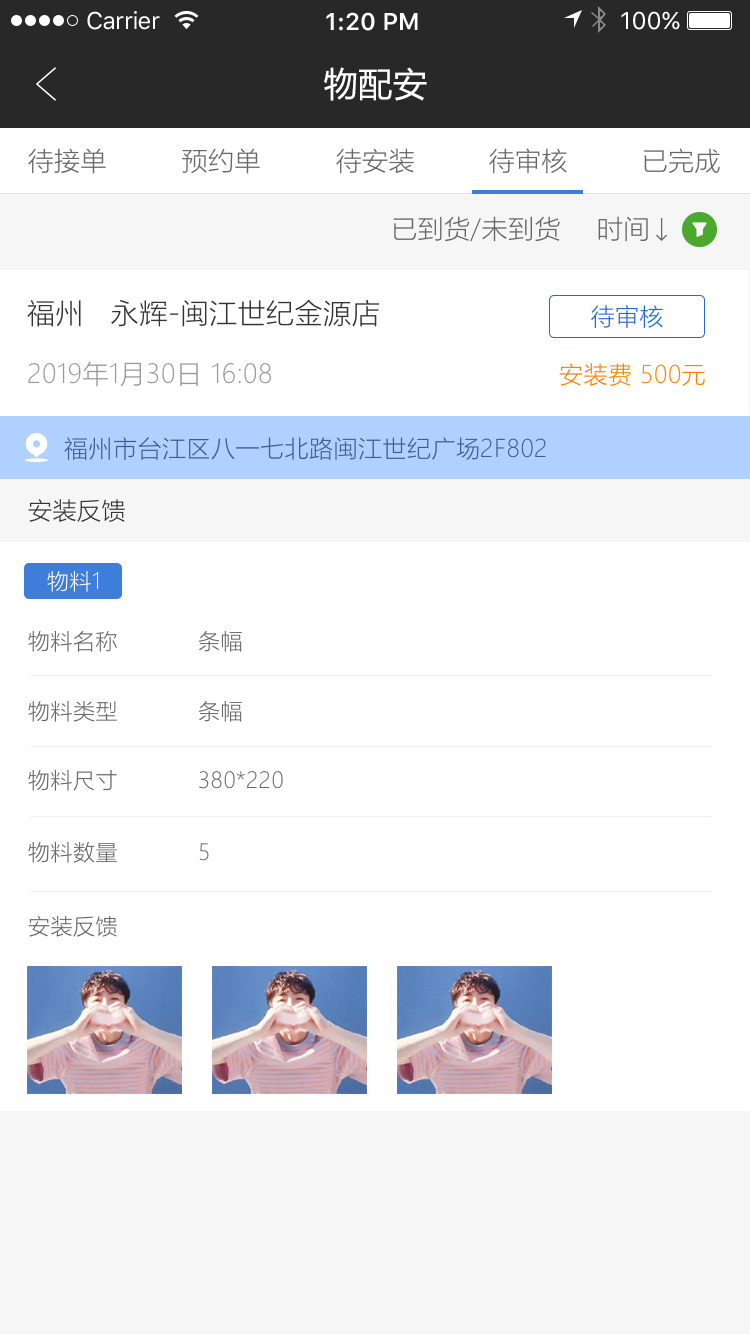
<style>
.page{position:relative;width:750px;height:1334px;background:#ffffff}
.page>*{position:absolute;margin:0}
.t1{font:24px "SFUIText-Regular";letter-spacing:-0.025em;color:#ffffff}
.t2{font:24px "SFUIText-Semibold";color:#ffffff}
.t3{font:24px "SFUIText-Regular";color:#ffffff}
.t4{font:34px "MicrosoftYaHei";letter-spacing:0.02em;color:#ffffff}
.t5{font:26px "MicrosoftYaHeiLight";letter-spacing:0.02em;color:#666666}
.t6{font:28px "MicrosoftYaHeiLight";letter-spacing:0.02em;color:#333333}
.t7{font:24px "MicrosoftYaHeiLight";letter-spacing:0.02em;color:#2269d4}
.t8{font:26px "MicrosoftYaHeiLight";letter-spacing:0.02em;color:#999999}
.t9{font:24px "MicrosoftYaHeiLight";letter-spacing:0.02em;color:#ff8100}
.t10{font:24px "MicrosoftYaHeiLight";letter-spacing:0.02em;color:#3d6094}
.t11{font:24px "MicrosoftYaHeiLight";letter-spacing:0.02em;color:#333333}
.t12{font:22px "MicrosoftYaHeiLight";letter-spacing:0.02em;color:#ffffff}
.t13{font:22px "MicrosoftYaHeiLight";letter-spacing:0.02em;color:#666666}
</style>
<div class="page">
<p class="t1" style="left:87px;top:11px;width:73px;height:19px">Carrier</p>
<p class="t2" style="left:326px;top:12px;width:92px;height:19px">1:20 PM</p>
<p class="t3" style="left:621px;top:11px;width:59px;height:19px">100%</p>
<p class="t4" style="left:324px;top:67px;width:103px;height:34px">物配安</p>
<p class="t5" style="left:28px;top:148px;width:78px;height:26px">待接单</p>
<p class="t5" style="left:182px;top:148px;width:78px;height:26px">预约单</p>
<p class="t5" style="left:336px;top:148px;width:78px;height:26px">待安装</p>
<p class="t5" style="left:489px;top:148px;width:78px;height:26px">待审核</p>
<p class="t5" style="left:644px;top:148px;width:76px;height:25px">已完成</p>
<p class="t5" style="left:393px;top:216px;width:167px;height:26px">已到货/未到货</p>
<p class="t5" style="left:598px;top:216px;width:50px;height:26px">时间</p>
<p class="t6" style="left:27px;top:299px;width:353px;height:28px">福州   永辉-闽江世纪金源店</p>
<p class="t7" style="left:591px;top:305px;width:72px;height:23px">待审核</p>
<p class="t8" style="left:28px;top:361px;width:243px;height:26px">2019年1月30日 16:08</p>
<p class="t9" style="left:559px;top:363px;width:146px;height:23px">安装费 500元</p>
<p class="t10" style="left:64px;top:437px;width:482px;height:23px">福州市台江区八一七北路闽江世纪广场2F802</p>
<p class="t11" style="left:28px;top:499px;width:97px;height:23px">安装反馈</p>
<p class="t12" style="left:47px;top:570px;width:52px;height:22px">物料1</p>
<p class="t13" style="left:28px;top:630px;width:89px;height:22px">物料名称</p>
<p class="t13" style="left:198px;top:631px;width:44px;height:21px">条幅</p>
<p class="t13" style="left:28px;top:700px;width:89px;height:22px">物料类型</p>
<p class="t13" style="left:198px;top:701px;width:44px;height:21px">条幅</p>
<p class="t13" style="left:28px;top:769px;width:89px;height:22px">物料尺寸</p>
<p class="t13" style="left:199px;top:771px;width:84px;height:18px">380*220</p>
<p class="t13" style="left:28px;top:841px;width:89px;height:22px">物料数量</p>
<p class="t13" style="left:199px;top:843px;width:10px;height:18px">5</p>
<p class="t13" style="left:28px;top:915px;width:89px;height:22px">安装反馈</p>
</div>
